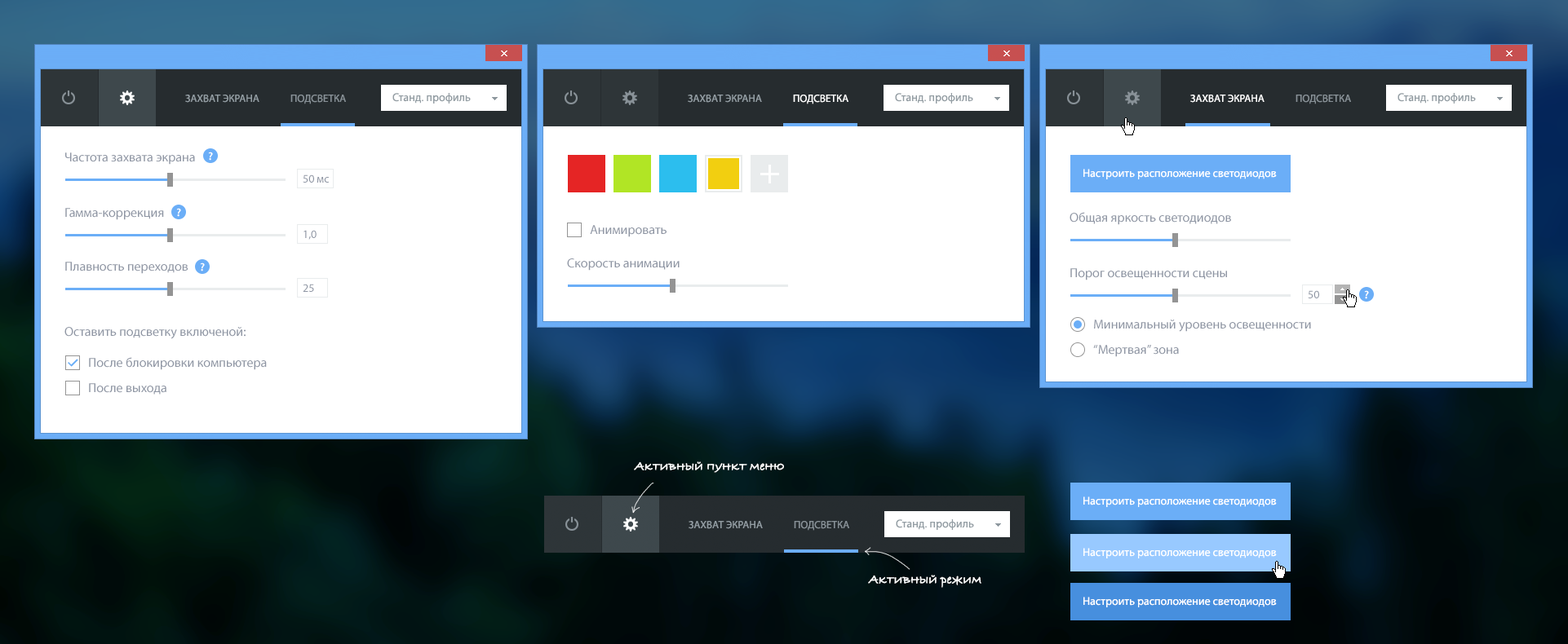
<style>
.page{position:relative;width:1568px;height:644px;background:#ffffff}
.page>*{position:absolute;margin:0}
.t1{font:10.6px "MyriadPro-Regular";letter-spacing:0.005em;color:#939da3;text-transform:uppercase}
.t2{font:10.6px "MyriadPro-Regular";letter-spacing:0.005em;color:#899298;text-transform:uppercase}
.t3{font:11.4px "MyriadPro-Regular";letter-spacing:0.005em;color:#939da3}
.t4{font:10.6px "MyriadPro-Regular";letter-spacing:0.005em;color:#ffffff;text-transform:uppercase}
.t5{font:13.1px "MyriadPro-Regular";color:#8f96a4}
.t6{font:11.4px "MyriadPro-Semibold";color:#ffffff}
.t7{font:11.4px "MyriadPro-Regular";color:#ffffff}
.t8{font:11.4px "MyriadPro-Regular";color:#8f96a4}
.t9{font:13.1px "BradleyHandITCTT-Bold";letter-spacing:0.005em;color:#ffffff}
</style>
<div class="page">
<p class="t1" style="left:185px;top:95px;width:74px;height:8px">Захват экрана</p>
<p class="t2" style="left:290px;top:95px;width:56px;height:9px">Подсветка</p>
<p class="t3" style="left:392px;top:93px;width:79px;height:11px">Станд. профиль</p>
<p class="t1" style="left:688px;top:95px;width:74px;height:8px">Захват экрана</p>
<p class="t4" style="left:793px;top:95px;width:55px;height:9px">Подсветка</p>
<p class="t3" style="left:895px;top:93px;width:78px;height:11px">Станд. профиль</p>
<p class="t4" style="left:1190px;top:95px;width:75px;height:8px">Захват экрана</p>
<p class="t2" style="left:1296px;top:95px;width:55px;height:9px">Подсветка</p>
<p class="t3" style="left:1397px;top:93px;width:79px;height:11px">Станд. профиль</p>
<p class="t5" style="left:65px;top:153px;width:130px;height:12px">Частота захвата экрана</p>
<p class="t6" style="left:208px;top:152px;width:5px;height:9px">?</p>
<p class="t7" style="left:1083px;top:169px;width:194px;height:10px">Настроить расположение светодиодов</p>
<p class="t8" style="left:303px;top:175px;width:26px;height:8px">50 мс</p>
<p class="t5" style="left:65px;top:208px;width:99px;height:12px">Гамма-коррекция</p>
<p class="t6" style="left:176px;top:208px;width:5px;height:9px">?</p>
<p class="t5" style="left:1070px;top:212px;width:161px;height:13px">Общая яркость светодиодов</p>
<p class="t8" style="left:303px;top:230px;width:14px;height:10px">1,0</p>
<p class="t5" style="left:590px;top:225px;width:77px;height:12px">Анимировать</p>
<p class="t5" style="left:65px;top:262px;width:123px;height:12px">Плавность переходов</p>
<p class="t6" style="left:200px;top:263px;width:5px;height:9px">?</p>
<p class="t5" style="left:567px;top:259px;width:113px;height:12px">Скорость анимации</p>
<p class="t5" style="left:1070px;top:268px;width:157px;height:13px">Порог освещенности сцены</p>
<p class="t8" style="left:303px;top:284px;width:11px;height:8px">25</p>
<p class="t8" style="left:1308px;top:290px;width:11px;height:9px">50</p>
<p class="t6" style="left:1364px;top:290px;width:5px;height:9px">?</p>
<p class="t5" style="left:64px;top:327px;width:182px;height:12px">Оставить подсветку включеной:</p>
<p class="t5" style="left:1094px;top:320px;width:217px;height:12px">Минимальный уровень освещенности</p>
<p class="t5" style="left:1093px;top:345px;width:86px;height:12px">“Мертвая” зона</p>
<p class="t5" style="left:89px;top:357px;width:178px;height:13px">После блокировки компьютера</p>
<p class="t5" style="left:89px;top:383px;width:77px;height:12px">После выхода</p>
<p class="t9" style="left:634px;top:462px;width:150px;height:11px">Активный пункт меню</p>
<p class="t7" style="left:1083px;top:497px;width:194px;height:10px">Настроить расположение светодиодов</p>
<p class="t7" style="left:1083px;top:548px;width:194px;height:11px">Настроить расположение светодиодов</p>
<p class="t9" style="left:868px;top:575px;width:113px;height:13px">Активный режим</p>
<p class="t7" style="left:1083px;top:597px;width:194px;height:11px">Настроить расположение светодиодов</p>
</div>
